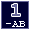
<style>
.page{position:relative;width:30px;height:30px;background:#000033}
.page>*{position:absolute;margin:0}
.t1{font:9.6px "CourierNewPSMT";color:#ffffff;scale:1.25 1}
</style>
<div class="page">
<p class="t1" style="left:6px;top:21px;width:19px;height:6px">-AB</p>
</div>
